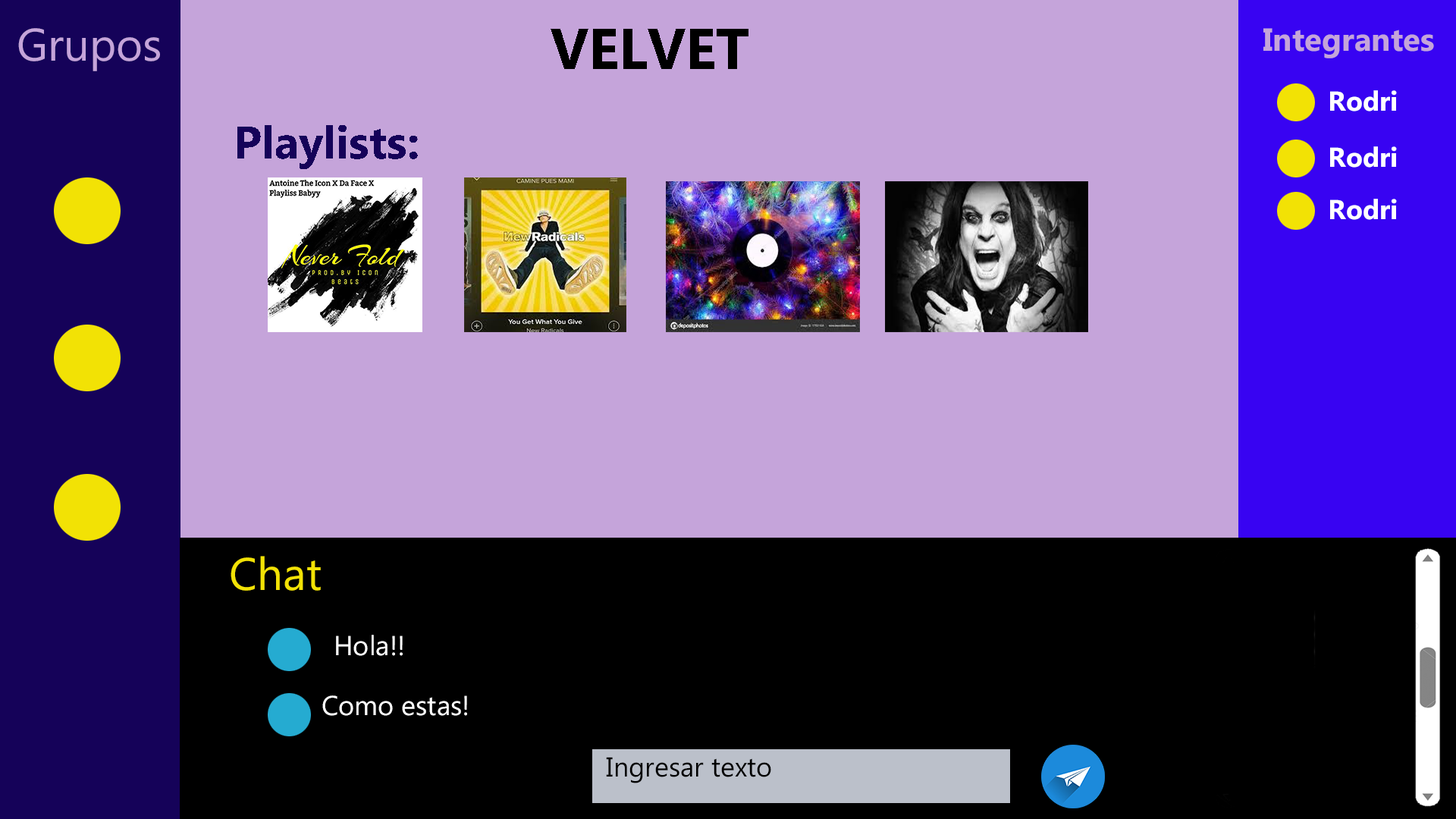
<style>
.page{position:relative;width:1456px;height:819px;background:#c5a4da}
.page>*{position:absolute;margin:0}
.t1{font:45.5px "MicrosoftPhagsPa";color:#c5a4da}
.t2{font:56.9px "MicrosoftPhagsPa-Bold";color:#000000}
.t3{font:31.8px "MicrosoftPhagsPa-Bold";color:#c5a4da}
.t4{font:27.3px "MicrosoftPhagsPa-Bold";color:#ffffff}
.t5{font:45.5px "MicrosoftPhagsPa-Bold";color:#150259}
.t6{font:45.5px "MicrosoftPhagsPa";color:#f2e205}
.t7{font:27.3px "MicrosoftPhagsPa";color:#ffffff}
.t8{font:27.3px "MicrosoftPhagsPa";color:#000000}
</style>
<div class="page">
<p class="t1" style="left:18px;top:28px;width:142px;height:43px">Grupos</p>
<p class="t2" style="left:551px;top:29px;width:197px;height:40px">VELVET</p>
<p class="t3" style="left:1263px;top:28px;width:171px;height:30px">Integrantes</p>
<p class="t4" style="left:1330px;top:90px;width:67px;height:21px">Rodri</p>
<p class="t5" style="left:237px;top:125px;width:181px;height:44px">Playlists:</p>
<p class="t4" style="left:1330px;top:146px;width:67px;height:22px">Rodri</p>
<p class="t4" style="left:1330px;top:199px;width:67px;height:21px">Rodri</p>
<p class="t6" style="left:231px;top:556px;width:90px;height:35px">Chat</p>
<p class="t7" style="left:336px;top:635px;width:67px;height:21px">Hola!!</p>
<p class="t7" style="left:322px;top:695px;width:145px;height:21px">Como estas!</p>
<p class="t8" style="left:606px;top:757px;width:165px;height:26px">Ingresar texto</p>
</div>
